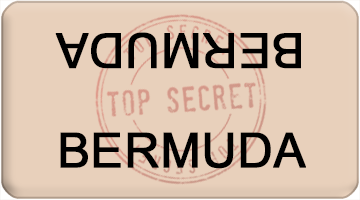
<style>
.page{position:relative;width:360px;height:200px;background:#e8d0bb}
.page>*{position:absolute;margin:0}
.t1{font:48px "ArialMT";color:#000000;font-weight:bold}
</style>
<div class="page">
<p class="t1" style="left:55px;top:32px;width:246px;height:37px;rotate:180deg">BERMUDA</p>
<p class="t1" style="left:60px;top:132px;width:246px;height:37px">BERMUDA</p>
</div>
